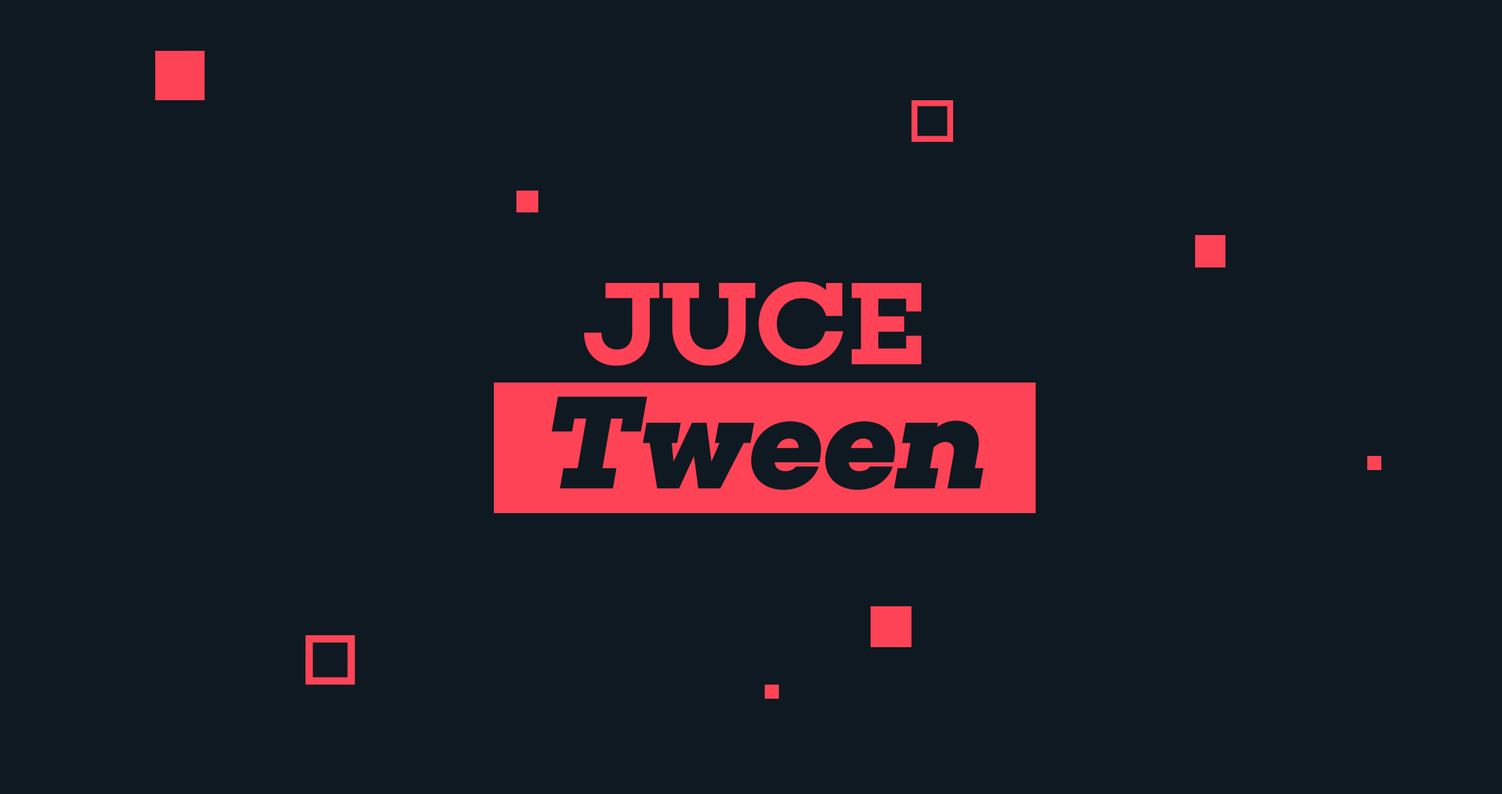
<style>
.page{position:relative;width:1502px;height:794px;background:#0f1921}
.page>*{position:absolute;margin:0}
.t1{font:119.5px "Choplin-SemiBold";color:#ff4357}
.t2{font:134.4px "Choplin-BoldItalic";color:#0f1921}
.t3{font:134.4px "Choplin-SemiBold";color:#0f1921}
</style>
<div class="page">
<p class="t1" style="left:584px;top:282px;width:338px;height:84px">JUCE</p>
<p class="t2" style="left:552px;top:397px;width:432px;height:93px"><span class="t3"> </span>Tween</p>
</div>
